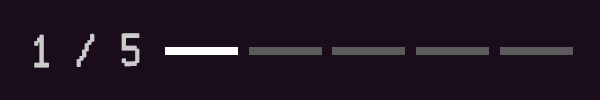
<style>
.page{position:relative;width:600px;height:100px;background:#1b0c1b}
.page>*{position:absolute;margin:0}
.t1{font:50px "UnifontMedium";color:#cbcbcb;font-weight:bold;scale:0.86 1}
</style>
<div class="page">
<p class="t1" style="left:34px;top:33px;width:106px;height:35px;rotate:-1deg">1 / 5</p>
</div>
